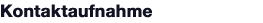
<style>
.page{position:relative;width:263px;height:23px;background:#ffffff}
.page>*{position:absolute;margin:0}
.t1{font:17px "HelveticaNeue-Bold";letter-spacing:0.005em;color:#111222;font-weight:bold}
</style>
<div class="page">
<p class="t1" style="left:1px;top:4px;width:151px;height:14px">Kontaktaufnahme</p>
</div>
